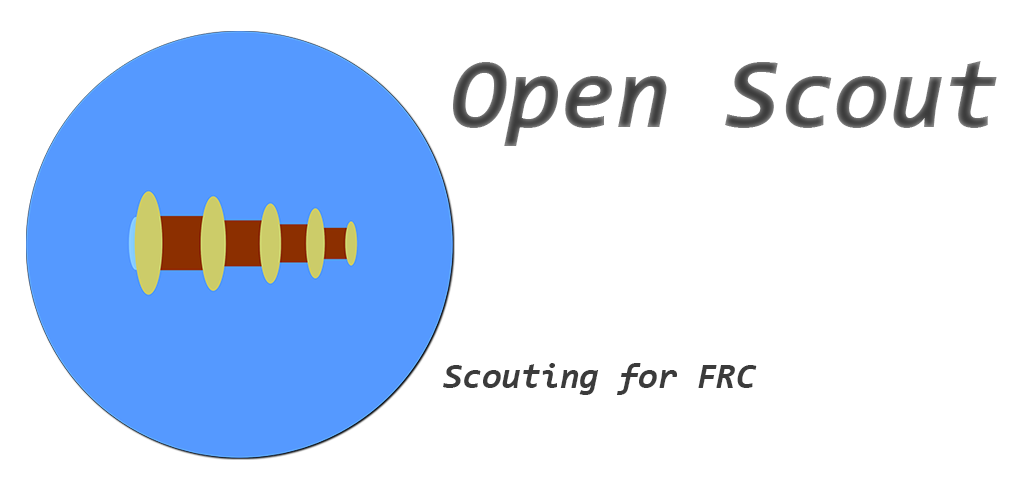
<style>
.page{position:relative;width:1024px;height:500px;background:#ffffff}
.page>*{position:absolute;margin:0}
.t1{font:99.6px "Consolas-BoldItalic";color:#515151}
.t2{font:35.6px "Consolas-BoldItalic";color:#3b3b3b}
</style>
<div class="page">
<p class="t1" style="left:453px;top:61px;width:544px;height:85px">Open Scout</p>
<p class="t2" style="left:443px;top:363px;width:314px;height:32px">Scouting for FRC</p>
</div>
